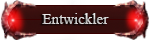
<style>
.page{position:relative;width:150px;height:40px}
.page>*{position:absolute;margin:0}
.t1{font:15px "TimesNewRomanPSMT";color:#d3d3d3}
</style>
<div class="page">
<p class="t1" style="left:42px;top:13px;width:67px;height:11px">Entwickler</p>
</div>
